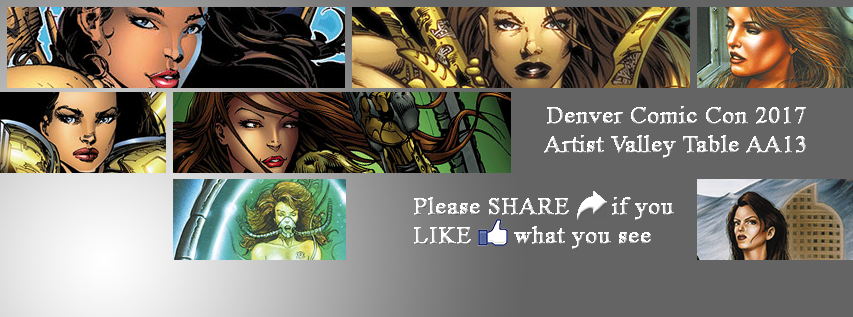
<style>
.page{position:relative;width:853px;height:317px;background:#646464}
.page>*{position:absolute;margin:0}
.t1{font:24px "TimesNewRomanPSMT";font-weight:bold}
</style>
<div class="page">
<p class="t1" style="left:544px;top:106px;width:262px;height:52px;text-align:center">Denver Comic Con 2017<br>Artist Valley Table AA13</p>
<p class="t1" style="left:414px;top:197px;width:260px;height:52px">Please SHARE      if you<br>LIKE      what you see</p>
</div>
